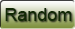
<style>
.page{position:relative;width:75px;height:29px}
.page>*{position:absolute;margin:0}
.t1{font:18px "ArialMT";color:#122905}
</style>
<div class="page">
<p class="t1" style="left:5px;top:8px;width:67px;height:13px">Random</p>
</div>
